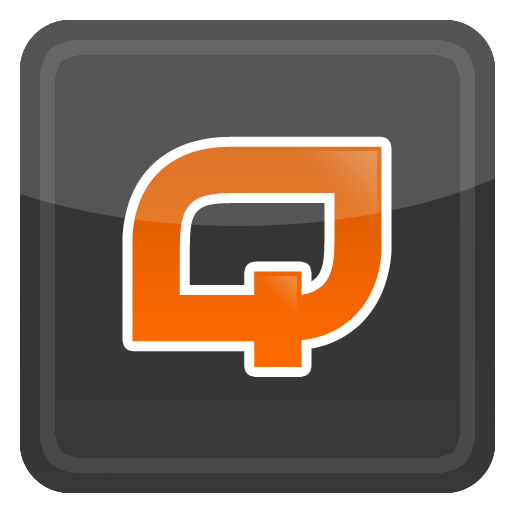
<style>
.page{position:relative;width:512px;height:512px}
.page>*{position:absolute;margin:0}
.t1{font:250px "Xirod-Regular";text-transform:uppercase}
</style>
<div class="page">
<p class="t1" style="left:132px;top:146px;width:250px;height:221px">Q</p>
</div>
